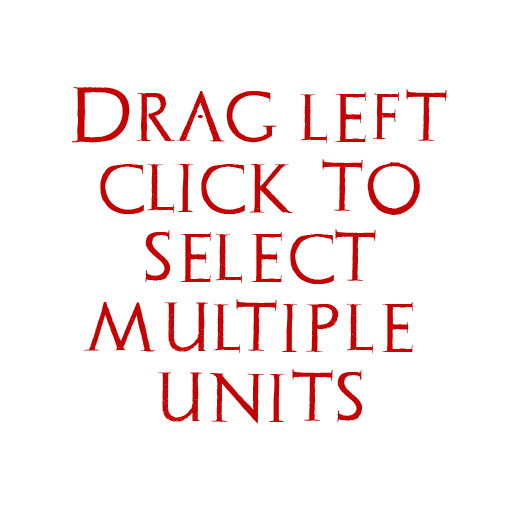
<style>
.page{position:relative;width:512px;height:512px;background:#ffffff}
.page>*{position:absolute;margin:0}
.t1{font:58.3px "Archeologicaps";color:#c40000}
</style>
<div class="page">
<p class="t1" style="left:72px;top:86px;width:375px;height:338px;text-align:center">Drag left<br>click to<br>select<br>multiple <br>units</p>
</div>
